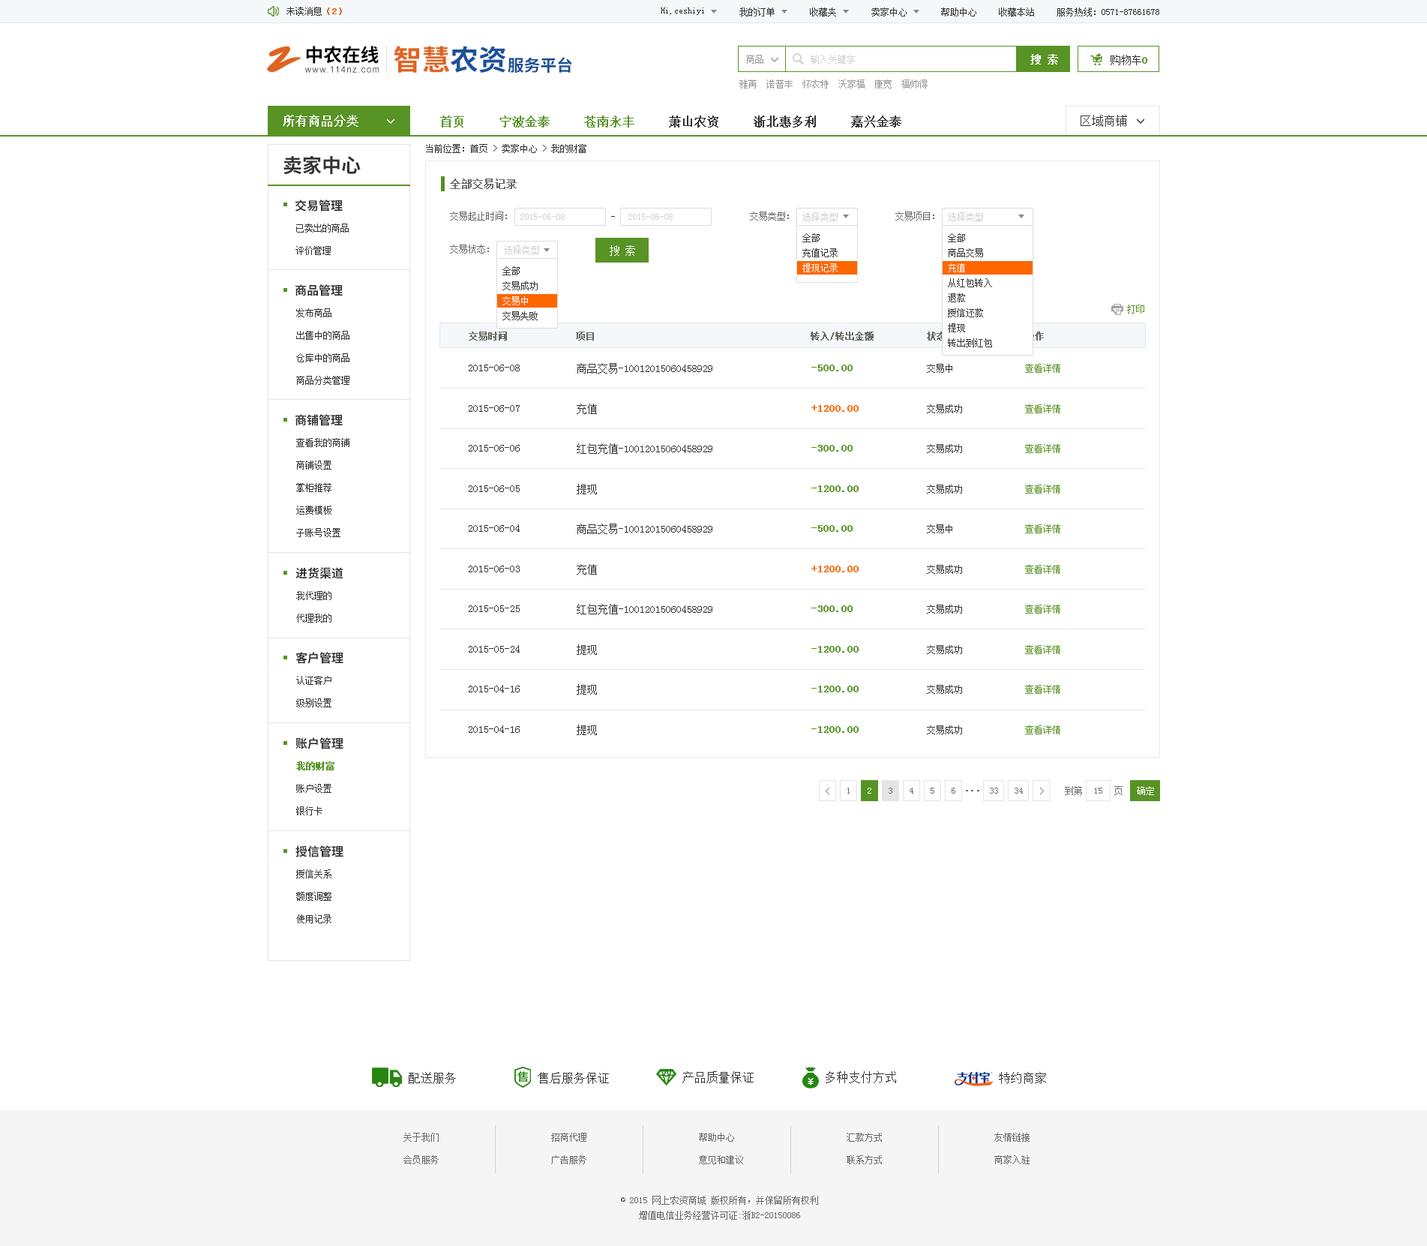
<style>
.page{position:relative;width:1427px;height:1246px;background:#ffffff}
.page>*{position:absolute;margin:0}
.t1{font:9px "SimSun";color:#333333}
.t2{font:9px "SimSun";color:#e0631f;font-weight:bold}
.t3{font:38px "SmudgerLetPlain";color:#e0631f}
.t4{font:18.6px "SourceHanSansCN-Bold";color:#060001}
.t5{font:28.4px "SourceHanSansCN-Bold";color:#e0631f}
.t6{font:28.4px "SourceHanSansCN-Bold";color:#1a529c}
.t7{font:10.5px "SimSun";color:#ffffff;font-weight:bold}
.t8{font:16.3px "SourceHanSansCN-Bold";color:#194f93}
.t9{font:9px "SimSun";color:#999999}
.t10{font:9px "SimSun";color:#d1d1d1}
.t11{font:10.5px "SimSun";color:#333333}
.t12{font:10.5px "SimSun";color:#589325;font-weight:bold}
.t13{font:8.9px "ArialMT";letter-spacing:0.1em;color:#585859}
.t14{font:12px "SimSun";color:#ffffff;font-weight:bold}
.t15{font:12px "SimSun";color:#333333;font-weight:bold}
.t16{font:12px "SimSun";color:#589325;font-weight:bold}
.t17{font:12px "SimSun";color:#333333}
.t18{font:19.5px "SourceHanSansCN-Bold";color:#333333}
.t19{font:10.5px "SimSun";color:#666666;font-weight:bold}
.t20{font:12px "SourceHanSansCN-Bold";color:#333333}
.t21{font:9px "SimSun";color:#666666}
.t22{font:9px/22.5px "SimSun";color:#333333}
.t23{font:9px/15px "SimSun";color:#333333}
.t24{font:9px/15px "SimSun";color:#ffffff}
.t25{font:10.5px "SimSun";color:#ffffff}
.t26{font:9px "SimSun";color:#589325}
.t27{font:9px "SimSun";color:#666666;font-weight:bold}
.t28{font:10.5px "SimSun";color:#ff6600;font-weight:bold}
.t29{font:9px/22.5px "SimSun";color:#589325;font-weight:bold}
.t30{font:9px "SimSun";color:#6e6e6e}
.t31{font:9px "SimSun";color:#ffffff}
.t32{font:10.5px "SimSun";letter-spacing:-0.3em;color:#6e6e6e;font-weight:bold}
.t33{font:9px/22.5px "SimSun";color:#666666}
.t34{font:9px/15px "SimSun";color:#666666}
</style>
<div class="page">
<p class="t1" style="left:286px;top:7px;width:56px;height:9px">未读消息<span class="t2">（2）</span></p>
<p class="t1" style="left:661px;top:8px;width:43px;height:7px">Hi,ceshiyi</p>
<p class="t1" style="left:740px;top:8px;width:35px;height:8px">我的订单</p>
<p class="t1" style="left:810px;top:8px;width:26px;height:8px">收藏夹</p>
<p class="t1" style="left:872px;top:8px;width:35px;height:8px">卖家中心</p>
<p class="t1" style="left:941px;top:8px;width:35px;height:8px">帮助中心</p>
<p class="t1" style="left:999px;top:8px;width:35px;height:8px">收藏本站</p>
<p class="t1" style="left:1057px;top:8px;width:103px;height:8px">服务热线：0571-87661678</p>
<p class="t3" style="left:267px;top:46px;width:35px;height:27px">Z</p>
<p class="t4" style="left:306px;top:46px;width:73px;height:18px">中农在线</p>
<p class="t5" style="left:394px;top:46px;width:112px;height:27px">智慧<span class="t6">农资</span></p>
<p class="t7" style="left:1030px;top:54px;width:28px;height:10px">搜 索</p>
<p class="t8" style="left:508px;top:57px;width:64px;height:16px">服务平台</p>
<p class="t9" style="left:746px;top:55px;width:18px;height:9px">商品</p>
<p class="t10" style="left:811px;top:55px;width:44px;height:9px">输入关键字</p>
<p class="t11" style="left:1111px;top:55px;width:37px;height:10px">购物车<span class="t12">0</span></p>
<p class="t13" style="left:304px;top:66px;width:76px;height:7px">www.114nz.com</p>
<p class="t9" style="left:740px;top:80px;width:188px;height:8px">雅苒  诺普丰  怀农特  沃家福  康宽  福帅得</p>
<p class="t14" style="left:283px;top:115px;width:75px;height:12px">所有商品分类</p>
<p class="t15" style="left:440px;top:116px;width:462px;height:12px"><span class="t16">首页     宁波金泰     苍南永丰    </span> 萧山农资     浙北惠多利     嘉兴金泰</p>
<p class="t17" style="left:1081px;top:115px;width:46px;height:12px">区域商铺</p>
<p class="t1" style="left:426px;top:144px;width:160px;height:9px">当前位置：首页 &gt; 卖家中心 &gt; 我的财富</p>
<p class="t18" style="left:284px;top:155px;width:77px;height:20px">卖家中心</p>
<p class="t19" style="left:450px;top:178px;width:67px;height:11px">全部交易记录</p>
<p class="t20" style="left:295px;top:200px;width:48px;height:12px">交易管理</p>
<p class="t21" style="left:450px;top:212px;width:57px;height:8px">交易起止时间：</p>
<p class="t10" style="left:520px;top:214px;width:45px;height:6px">2015-06-08</p>
<p class="t10" style="left:628px;top:214px;width:45px;height:6px">2015-06-08</p>
<p class="t21" style="left:750px;top:212px;width:39px;height:8px">交易类型：</p>
<p class="t10" style="left:802px;top:212px;width:36px;height:9px">选择类型</p>
<p class="t21" style="left:896px;top:212px;width:38px;height:8px">交易项目：</p>
<p class="t10" style="left:948px;top:212px;width:35px;height:9px">选择类型</p>
<p class="t22" style="left:296px;top:224px;width:53px;height:31px">已卖出的商品<br>评价管理</p>
<p class="t23" style="left:802px;top:233px;width:36px;height:39px">全部<br>充值记录<br><span class="t24">提现记录</span></p>
<p class="t23" style="left:948px;top:233px;width:44px;height:114px">全部<br>商品交易<br><span class="t24">充值<br></span>从红包转入<br>退款<br>授信还款<br>提现<br>转出到红包</p>
<p class="t21" style="left:450px;top:244px;width:39px;height:10px">交易状态：</p>
<p class="t10" style="left:504px;top:245px;width:35px;height:9px">选择类型</p>
<p class="t25" style="left:610px;top:245px;width:25px;height:11px">搜 索</p>
<p class="t23" style="left:502px;top:266px;width:36px;height:54px">全部<br>交易成功<br><span class="t24">交易中<br></span>交易失败</p>
<p class="t20" style="left:296px;top:284px;width:47px;height:12px">商品管理</p>
<p class="t26" style="left:1127px;top:304px;width:17px;height:10px">打印</p>
<p class="t22" style="left:296px;top:308px;width:54px;height:77px">发布商品<br>出售中的商品<br>仓库中的商品<br>商品分类管理</p>
<p class="t27" style="left:469px;top:332px;width:575px;height:8px">交易时间             项目                                         转入/转出金额          状态               操作</p>
<p class="t11" style="left:469px;top:364px;width:51px;height:7px">2015-06-08</p>
<p class="t11" style="left:577px;top:363px;width:135px;height:11px">商品交易-10012015060458929</p>
<p class="t12" style="left:812px;top:364px;width:41px;height:7px">-500.00</p>
<p class="t1" style="left:927px;top:364px;width:25px;height:9px">交易中</p>
<p class="t26" style="left:1025px;top:364px;width:35px;height:9px">查看详情</p>
<p class="t20" style="left:296px;top:414px;width:47px;height:12px">商铺管理</p>
<p class="t11" style="left:469px;top:405px;width:51px;height:7px">2015-06-07</p>
<p class="t11" style="left:577px;top:404px;width:20px;height:10px">充值</p>
<p class="t28" style="left:812px;top:405px;width:47px;height:7px">+1200.00</p>
<p class="t1" style="left:927px;top:404px;width:35px;height:9px">交易成功</p>
<p class="t26" style="left:1025px;top:404px;width:35px;height:9px">查看详情</p>
<p class="t22" style="left:296px;top:438px;width:54px;height:99px">查看我的商铺<br>商铺设置<br>掌柜推荐<br>运费模板<br>子账号设置</p>
<p class="t11" style="left:469px;top:445px;width:51px;height:7px">2015-06-06</p>
<p class="t11" style="left:577px;top:443px;width:135px;height:11px">红包充值-10012015060458929</p>
<p class="t12" style="left:812px;top:445px;width:41px;height:7px">-300.00</p>
<p class="t1" style="left:927px;top:444px;width:35px;height:9px">交易成功</p>
<p class="t26" style="left:1025px;top:444px;width:35px;height:9px">查看详情</p>
<p class="t11" style="left:469px;top:485px;width:51px;height:7px">2015-06-05</p>
<p class="t11" style="left:577px;top:484px;width:20px;height:10px">提现</p>
<p class="t12" style="left:812px;top:485px;width:47px;height:7px">-1200.00</p>
<p class="t1" style="left:927px;top:484px;width:35px;height:10px">交易成功</p>
<p class="t26" style="left:1025px;top:484px;width:35px;height:10px">查看详情</p>
<p class="t11" style="left:469px;top:524px;width:51px;height:8px">2015-06-04</p>
<p class="t11" style="left:577px;top:524px;width:135px;height:10px">商品交易-10012015060458929</p>
<p class="t12" style="left:812px;top:525px;width:41px;height:7px">-500.00</p>
<p class="t1" style="left:927px;top:524px;width:25px;height:9px">交易中</p>
<p class="t26" style="left:1025px;top:524px;width:35px;height:9px">查看详情</p>
<p class="t20" style="left:296px;top:567px;width:48px;height:12px">进货渠道</p>
<p class="t11" style="left:469px;top:566px;width:51px;height:6px">2015-06-03</p>
<p class="t11" style="left:577px;top:564px;width:20px;height:10px">充值</p>
<p class="t28" style="left:812px;top:566px;width:47px;height:6px">+1200.00</p>
<p class="t1" style="left:927px;top:565px;width:35px;height:9px">交易成功</p>
<p class="t26" style="left:1025px;top:565px;width:35px;height:9px">查看详情</p>
<p class="t22" style="left:296px;top:591px;width:36px;height:31px">我代理的<br>代理我的</p>
<p class="t11" style="left:469px;top:605px;width:51px;height:7px">2015-05-25</p>
<p class="t11" style="left:577px;top:604px;width:135px;height:10px">红包充值-10012015060458929</p>
<p class="t12" style="left:812px;top:605px;width:41px;height:7px">-300.00</p>
<p class="t1" style="left:927px;top:604px;width:35px;height:10px">交易成功</p>
<p class="t26" style="left:1025px;top:604px;width:35px;height:10px">查看详情</p>
<p class="t20" style="left:296px;top:652px;width:48px;height:12px">客户管理</p>
<p class="t11" style="left:469px;top:645px;width:51px;height:7px">2015-05-24</p>
<p class="t11" style="left:577px;top:644px;width:20px;height:11px">提现</p>
<p class="t12" style="left:812px;top:646px;width:47px;height:6px">-1200.00</p>
<p class="t1" style="left:927px;top:645px;width:35px;height:9px">交易成功</p>
<p class="t26" style="left:1025px;top:645px;width:35px;height:9px">查看详情</p>
<p class="t22" style="left:296px;top:676px;width:36px;height:31px">认证客户<br>级别设置</p>
<p class="t11" style="left:469px;top:685px;width:51px;height:7px">2015-04-16</p>
<p class="t11" style="left:577px;top:684px;width:20px;height:10px">提现</p>
<p class="t12" style="left:812px;top:686px;width:47px;height:6px">-1200.00</p>
<p class="t1" style="left:927px;top:685px;width:35px;height:9px">交易成功</p>
<p class="t26" style="left:1025px;top:685px;width:35px;height:9px">查看详情</p>
<p class="t11" style="left:469px;top:725px;width:51px;height:8px">2015-04-16</p>
<p class="t11" style="left:577px;top:724px;width:20px;height:11px">提现</p>
<p class="t12" style="left:812px;top:726px;width:47px;height:7px">-1200.00</p>
<p class="t1" style="left:927px;top:725px;width:35px;height:9px">交易成功</p>
<p class="t26" style="left:1025px;top:725px;width:35px;height:9px">查看详情</p>
<p class="t20" style="left:296px;top:737px;width:48px;height:12px">账户管理</p>
<p class="t22" style="left:296px;top:761px;width:38px;height:54px"><span class="t29">我的财富<br></span>账户设置<br>银行卡</p>
<p class="t30" style="left:826px;top:788px;width:4px;height:6px">&lt;</p>
<p class="t30" style="left:848px;top:788px;width:2px;height:6px">1</p>
<p class="t31" style="left:868px;top:788px;width:4px;height:6px">2</p>
<p class="t30" style="left:889px;top:788px;width:3px;height:6px">3</p>
<p class="t30" style="left:910px;top:788px;width:4px;height:6px">4</p>
<p class="t30" style="left:931px;top:788px;width:3px;height:6px">5</p>
<p class="t30" style="left:952px;top:788px;width:4px;height:6px">6</p>
<p class="t32" style="left:966px;top:790px;width:14px;height:1px">. . .</p>
<p class="t30" style="left:990px;top:788px;width:8px;height:6px">33</p>
<p class="t30" style="left:1015px;top:788px;width:8px;height:6px">34</p>
<p class="t30" style="left:1040px;top:788px;width:4px;height:6px">&gt;</p>
<p class="t30" style="left:1065px;top:786px;width:58px;height:9px">到第       页</p>
<p class="t30" style="left:1095px;top:788px;width:7px;height:6px">15</p>
<p class="t31" style="left:1137px;top:786px;width:17px;height:9px">确定</p>
<p class="t20" style="left:296px;top:845px;width:48px;height:12px">授信管理</p>
<p class="t22" style="left:296px;top:869px;width:36px;height:54px">授信关系<br>额度调整<br>使用记录</p>
<p class="t17" style="left:409px;top:1072px;width:47px;height:12px">配送服务</p>
<p class="t17" style="left:538px;top:1072px;width:71px;height:12px">售后服务保证</p>
<p class="t17" style="left:682px;top:1071px;width:72px;height:12px">产品质量保证</p>
<p class="t17" style="left:826px;top:1071px;width:70px;height:12px">多种支付方式</p>
<p class="t17" style="left:999px;top:1072px;width:47px;height:12px">特约商家</p>
<p class="t33" style="left:404px;top:1132px;width:35px;height:32px">关于我们<br>会员服务</p>
<p class="t33" style="left:551px;top:1132px;width:35px;height:32px">招商代理<br>广告服务</p>
<p class="t33" style="left:699px;top:1132px;width:44px;height:32px">帮助中心<br>意见和建议</p>
<p class="t33" style="left:847px;top:1132px;width:35px;height:32px">汇款方式<br>联系方式</p>
<p class="t33" style="left:994px;top:1132px;width:36px;height:32px">友情链接<br>商家入驻</p>
<p class="t34" style="left:621px;top:1196px;width:197px;height:24px;text-align:center">© 2015 网上农资商城 版权所有，并保留所有权利<br>增值电信业务经营许可证:浙B2-20150086</p>
</div>
